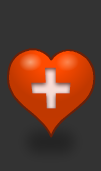
<style>
.page{position:relative;width:101px;height:171px;background:#333333}
.page>*{position:absolute;margin:0}
.t1{font:80px "ArialRoundedMTBold";letter-spacing:0.1em}
</style>
<div class="page">
<p class="t1" style="left:31px;top:67px;width:40px;height:42px">+</p>
</div>
